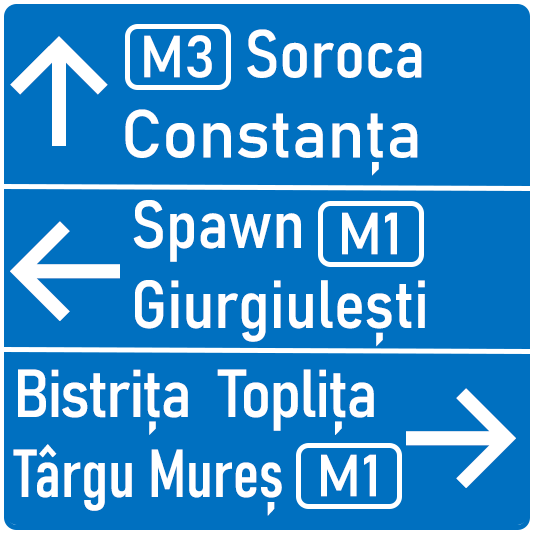
<style>
.page{position:relative;width:533px;height:533px;background:#0070c0}
.page>*{position:absolute;margin:0}
.t1{font:66.7px "Bahnschrift";color:#ffffff}
.t2{font:66.7px "Bahnschrift-SemiCondensed";color:#ffffff}
.t3{font:150px "Inter-Medium";color:#ffffff}
.t4{font:58.3px "Bahnschrift";color:#ffffff}
.t5{font:66.7px "Bahnschrift-SemiCondensed";letter-spacing:-0.025em;color:#ffffff}
.t6{font:66.7px "Bahnschrift-Condensed";color:#ffffff}
</style>
<div class="page">
<p class="t1" style="left:125px;top:29px;width:297px;height:147px"><span class="t2">    Soroca<br></span>Constanța</p>
<p class="t3" style="left:10px;top:36px;width:98px;height:110px">↑</p>
<p class="t4" style="left:144px;top:35px;width:68px;height:43px">M3</p>
<p class="t2" style="left:133px;top:200px;width:292px;height:147px">Spawn<br>Giurgiulești</p>
<p class="t3" style="left:10px;top:221px;width:110px;height:100px">←</p>
<p class="t4" style="left:342px;top:212px;width:55px;height:43px">M1</p>
<p class="t5" style="left:13px;top:369px;width:361px;height:147px">Bistrița  Toplița<br><span class="t6">Târgu Mureș</span></p>
<p class="t3" style="left:406px;top:388px;width:110px;height:100px">→</p>
<p class="t4" style="left:321px;top:454px;width:55px;height:43px">M1</p>
</div>
